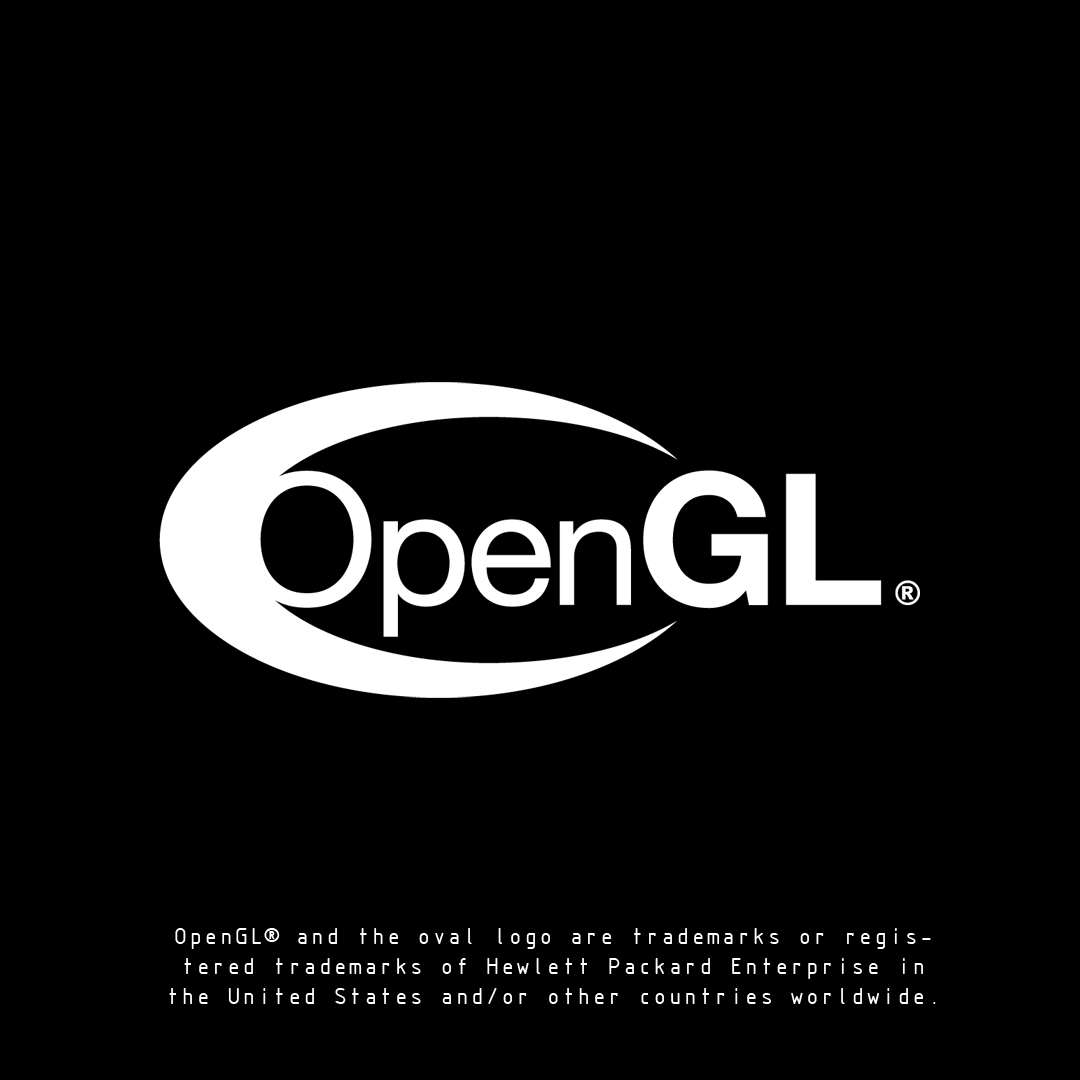
<style>
.page{position:relative;width:1080px;height:1080px;background:#000000}
.page>*{position:absolute;margin:0}
.t1{font:25px "ISOCTEUR";letter-spacing:-0.1em;color:#ffffff}
</style>
<div class="page">
<p class="t1" style="left:169px;top:928px;width:767px;height:76px;text-align:center">OpenGL® and the oval logo are trademarks or registered trademarks of Hewlett Packard Enterprise in the United States and/or other countries worldwide.</p>
</div>
